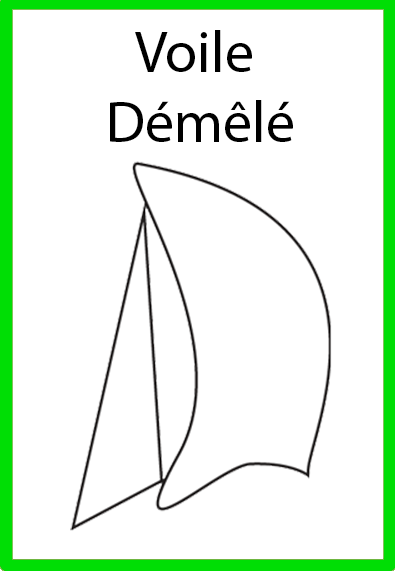
<style>
.page{position:relative;width:395px;height:571px;background:#ffffff}
.page>*{position:absolute;margin:0}
.t1{font:58.3px "MyriadPro-Regular";color:#000000}
</style>
<div class="page">
<p class="t1" style="left:110px;top:30px;width:183px;height:112px;text-align:center">Voile <br>Démêlé</p>
</div>
